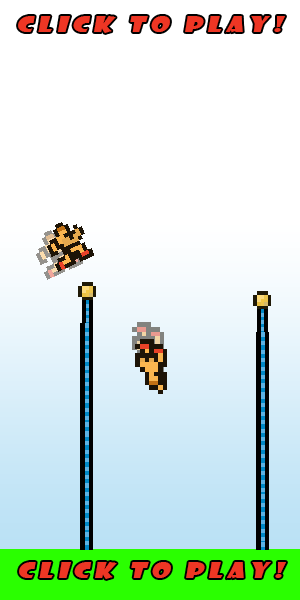
<style>
.page{position:relative;width:300px;height:600px;background:#ffffff}
.page>*{position:absolute;margin:0}
.t1{font:20.8px "ShowcardGothic-Reg";letter-spacing:0.18em;color:#ee3624;font-style:italic;scale:1.31 1}
</style>
<div class="page">
<p class="t1" style="left:18px;top:16px;width:267px;height:17px">Click To Play!</p>
<p class="t1" style="left:19px;top:562px;width:267px;height:17px">Click To Play!</p>
</div>
